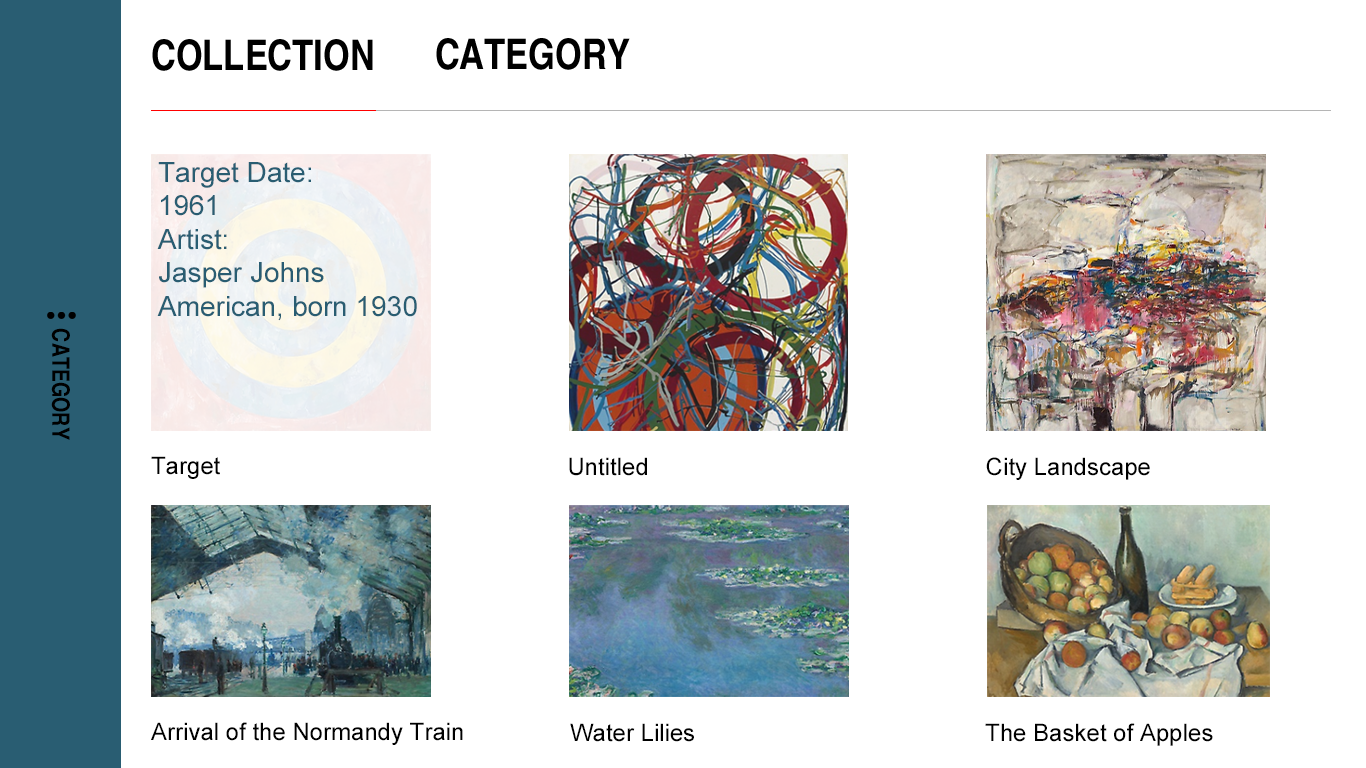
<style>
.page{position:relative;width:1366px;height:768px;background:#ffffff}
.page>*{position:absolute;margin:0}
.t1{font:28px "ArialMT";color:#295d72}
.t2{font:24px "ArialMT";color:#000000}
</style>
<div class="page">
<p class="t1" style="left:157px;top:162px;width:260px;height:159px">Target Date:<br>1961<br>Artist:<br>Jasper Johns<br>American, born 1930</p>
<p class="t2" style="left:151px;top:456px;width:69px;height:23px">Target</p>
<p class="t2" style="left:569px;top:457px;width:78px;height:19px">Untitled</p>
<p class="t2" style="left:986px;top:457px;width:164px;height:23px">City Landscape</p>
<p class="t2" style="left:151px;top:722px;width:312px;height:23px">Arrival of the Normandy Train</p>
<p class="t2" style="left:570px;top:723px;width:124px;height:19px">Water Lilies</p>
<p class="t2" style="left:985px;top:723px;width:228px;height:23px">The Basket of Apples</p>
</div>
